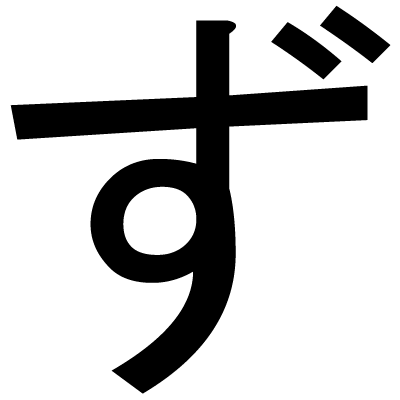
<style>
.page{position:relative;width:400px;height:400px;background:#ffffff}
.page>*{position:absolute;margin:0}
.t1{font:416.7px "MS-PGothic";color:#000000}
</style>
<div class="page">
<p class="t1" style="left:10px;top:5px;width:381px;height:389px">ず</p>
</div>
